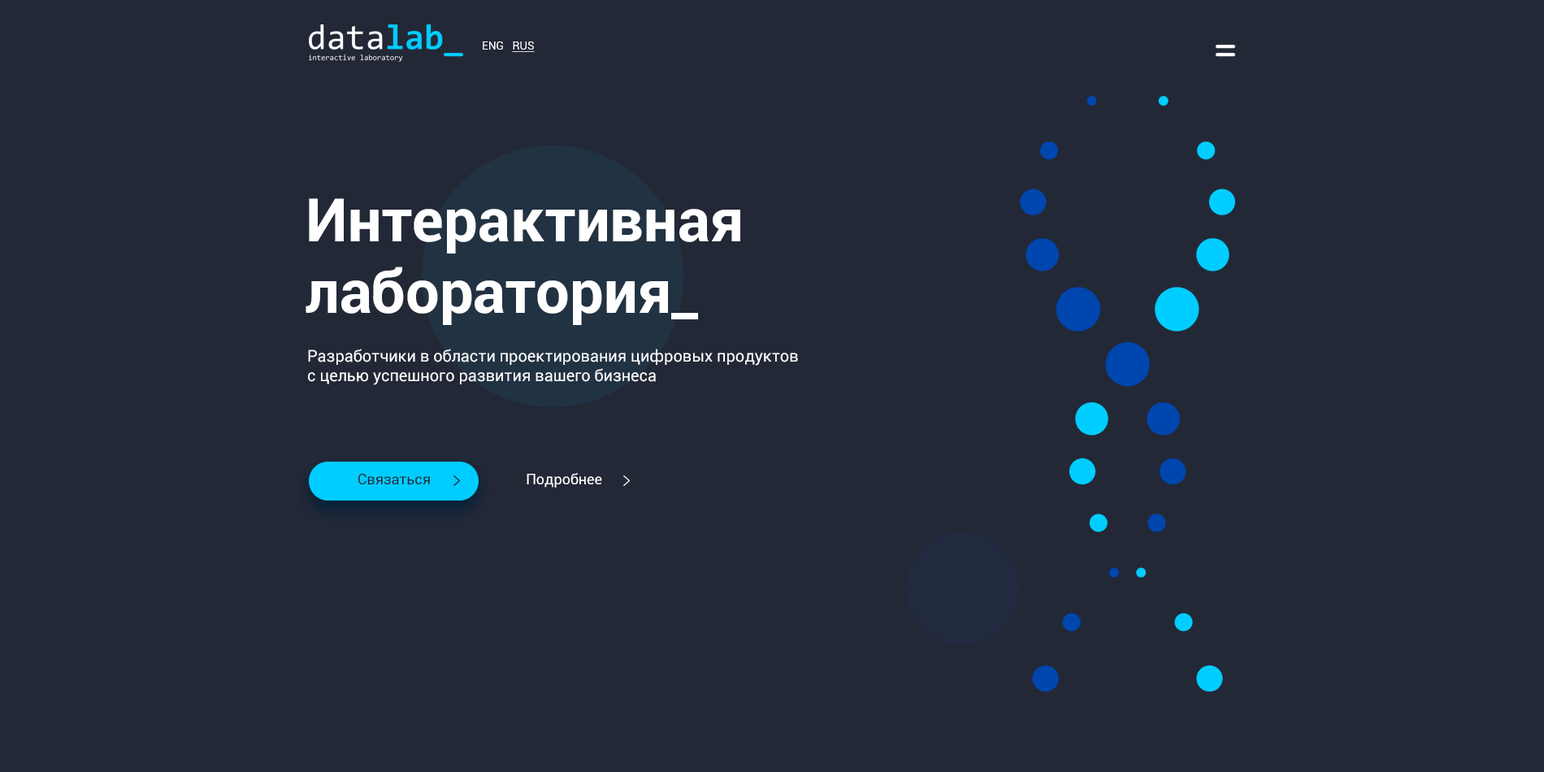
<style>
.page{position:relative;width:1544px;height:772px;background:#232837}
.page>*{position:absolute;margin:0}
.t1{font:11.4px "Roboto-Regular";color:#ffffff}
.t2{font:11.4px "Roboto-Regular";color:#ffffff;text-decoration:underline}
.t3{font:60.1px/71.5px "Roboto-Bold";color:#ffffff}
.t4{font:16.3px/19.5px "Roboto-Regular";color:#ffffff}
.t5{font:14.6px "Roboto-Regular";color:#232837}
.t6{font:14.6px "Roboto-Regular";color:#ffffff}
</style>
<div class="page">
<p class="t1" style="left:483px;top:41px;width:52px;height:11px">ENG   <span class="t2">RUS</span></p>
<p class="t3" style="left:306px;top:198px;width:434px;height:127px">Интерактивная<br>лаборатория_</p>
<p class="t4" style="left:308px;top:349px;width:490px;height:36px">Разработчики в области проектирования цифровых продуктов<br>с целью успешного развития вашего бизнеса</p>
<p class="t5" style="left:358px;top:474px;width:72px;height:11px">Связаться</p>
<p class="t6" style="left:527px;top:473px;width:75px;height:15px">Подробнее</p>
</div>
